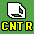
<style>
.page{position:relative;width:34px;height:34px;background:#55a646}
.page>*{position:absolute;margin:0}
.t1{font:11.6px "Gautami";letter-spacing:0.1em;color:#f6ff00;text-transform:uppercase;font-weight:bold;scale:0.9 1}
</style>
<div class="page">
<p class="t1" style="left:2px;top:22px;width:30px;height:8px">CNTR</p>
</div>
